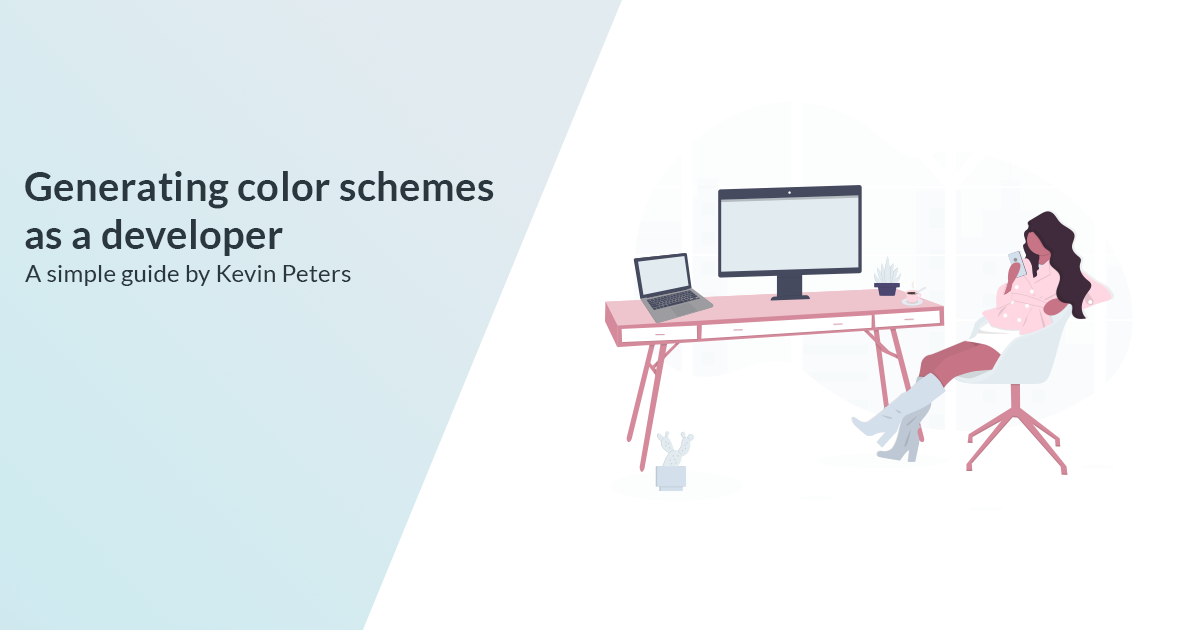
<style>
.page{position:relative;width:1200px;height:630px;background:#ffffff}
.page>*{position:absolute;margin:0}
.t1{font:40px "Lato-Bold";letter-spacing:0.01em;color:#2b373e}
.t2{font:24px "Lato-Regular";letter-spacing:0.01em;color:#2b373e}
</style>
<div class="page">
<p class="t1" style="left:25px;top:171px;width:469px;height:85px">Generating color schemes<br>as a developer</p>
<p class="t2" style="left:25px;top:265px;width:326px;height:21px">A simple guide by Kevin Peters</p>
</div>
